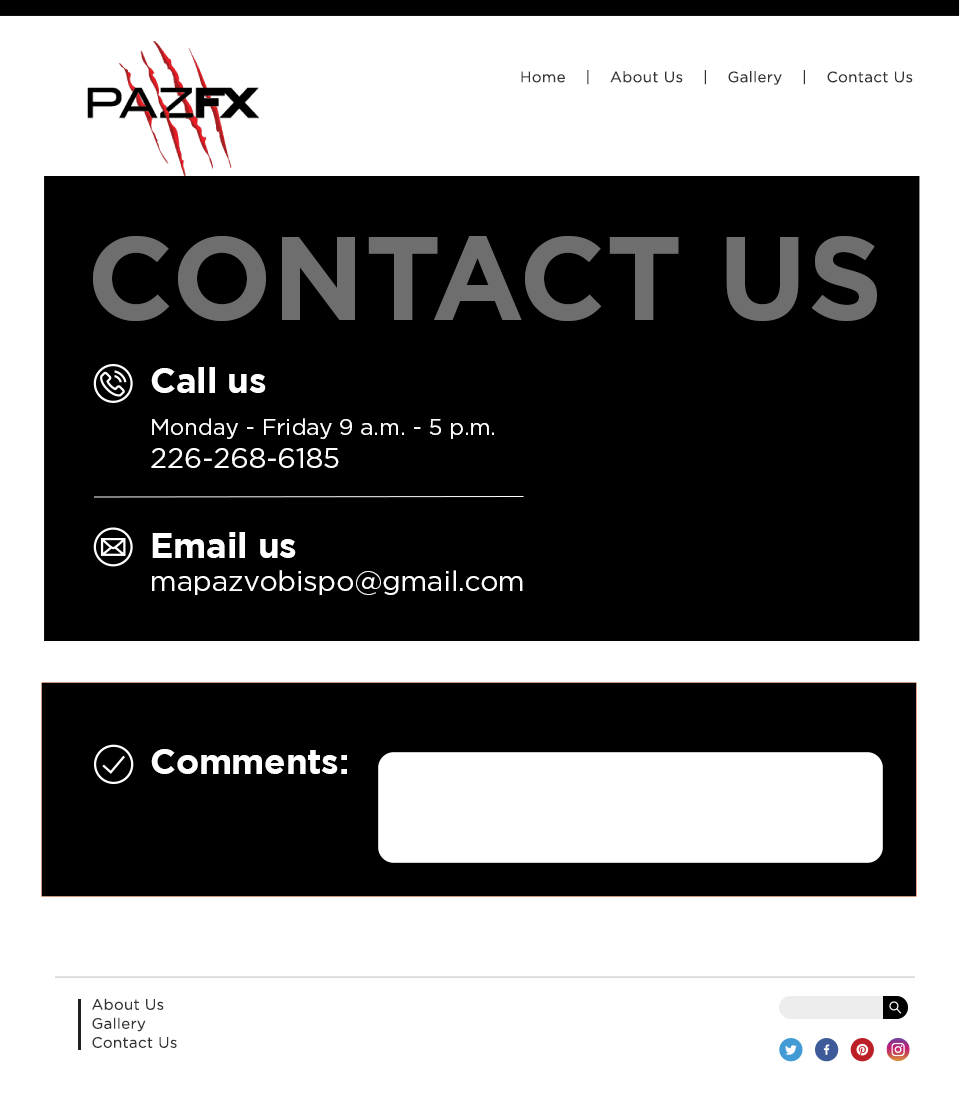
<style>
.page{position:relative;width:960px;height:1093px;background:#000000}
.page>*{position:absolute;margin:0}
.t1{font:15.1px "GothamBook";letter-spacing:0.025em;color:#333333}
.t2{font:117.9px "Gotham-Bold";color:#6e6e6e}
.t3{font:22.5px "Gotham-Book";color:#ffffff}
.t4{font:34.6px "GothamBold";color:#ffffff}
.t5{font:28.1px "Gotham-Book";color:#ffffff}
.t6{font:15px/19px "GothamBook";letter-spacing:0.025em;color:#333333}
</style>
<div class="page">
<p class="t1" style="left:521px;top:70px;width:392px;height:15px">Home    |    About Us    |    Gallery    |    Contact Us</p>
<p class="t2" style="left:93px;top:236px;width:784px;height:85px">CONTACT US</p>
<p class="t3" style="left:151px;top:367px;width:343px;height:101px"><span class="t4">Call us <br></span>Monday - Friday 9 a.m. - 5 p.m. <br><span class="t5">226-268-6185</span></p>
<p class="t5" style="left:152px;top:532px;width:371px;height:63px"><span class="t4">Email us<br></span>mapazvobispo@gmail.com</p>
<p class="t4" style="left:151px;top:749px;width:196px;height:25px">Comments:</p>
<p class="t6" style="left:92px;top:998px;width:85px;height:50px">About Us<br>Gallery<br>Contact Us</p>
</div>
